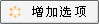
<style>
.page{position:relative;width:99px;height:24px;background:#f4f4f4}
.page>*{position:absolute;margin:0}
.t1{font:12px "SimSun";letter-spacing:0.2em;color:#000000}
</style>
<div class="page">
<p class="t1" style="left:32px;top:6px;width:54px;height:11px">增加选项</p>
</div>
